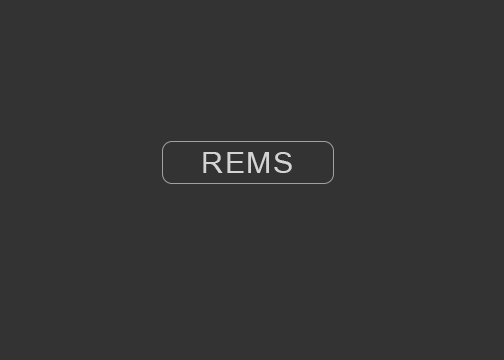
<style>
.page{position:relative;width:504px;height:360px;background:#333333}
.page>*{position:absolute;margin:0}
.t1{font:28.9px "ArialNarrow";letter-spacing:0.04em;color:#d5d4d4;scale:1.29 1}
</style>
<div class="page">
<p class="t1" style="left:203px;top:152px;width:89px;height:21px">REMS</p>
</div>
